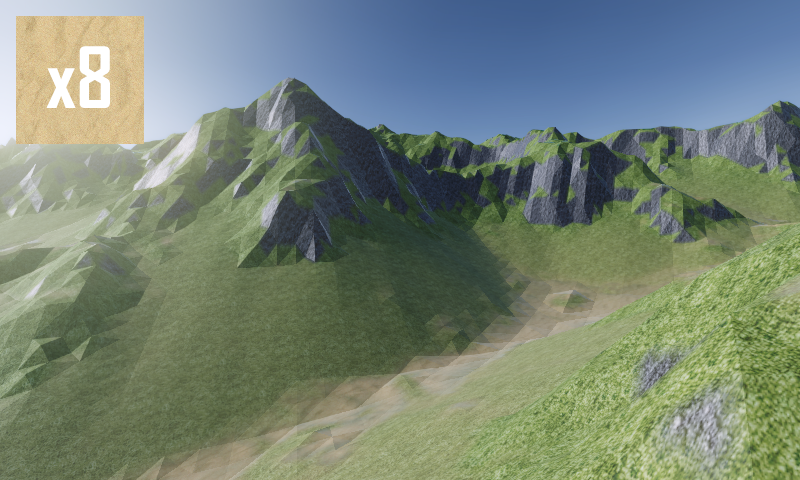
<style>
.page{position:relative;width:800px;height:480px}
.page>*{position:absolute;margin:0}
.t1{font:80.4px "AgencyFB-Bold";color:#ffffff}
</style>
<div class="page">
<p class="t1" style="left:46px;top:46px;width:64px;height:62px">x8</p>
</div>
